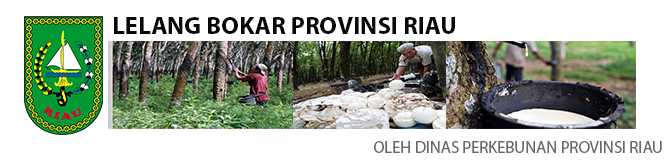
<style>
.page{position:relative;width:668px;height:160px;background:#ffffff}
.page>*{position:absolute;margin:0}
.t1{font:12px "MyriadPro-Bold";color:#080808}
.t2{font:16.6px "MyriadPro-Regular";color:#676767}
</style>
<div class="page">
<p class="t1" style="left:114px;top:17px;width:341px;height:17px">LELANG BOKAR PROVINSI RIAU</p>
<p class="t2" style="left:374px;top:141px;width:288px;height:12px">OLEH DINAS PERKEBUNAN PROVINSI RIAU</p>
</div>
